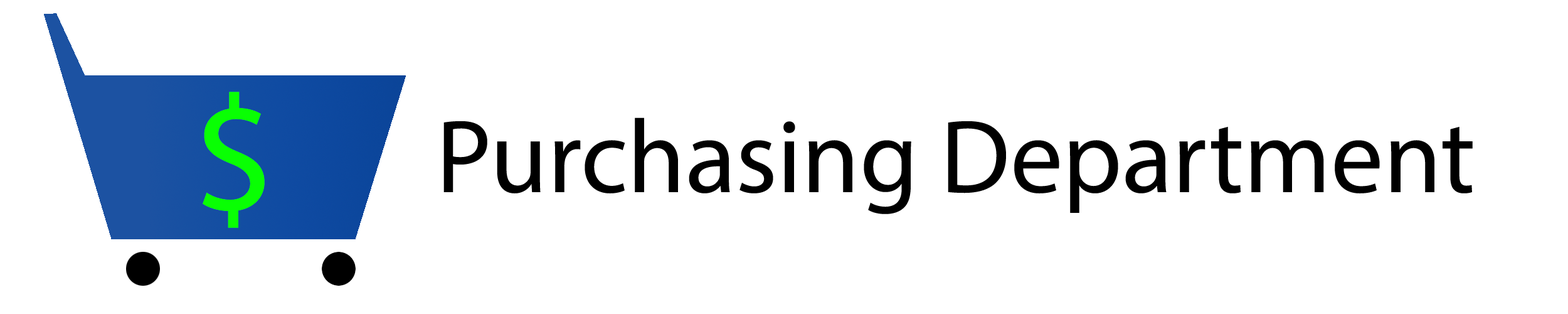
<style>
.page{position:relative;width:1568px;height:314px;background:#ffffff}
.page>*{position:absolute;margin:0}
.t1{font:104.5px "MyriadPro-Regular";color:#000000}
</style>
<div class="page">
<p class="t1" style="left:443px;top:117px;width:1030px;height:97px">Purchasing Department</p>
</div>
